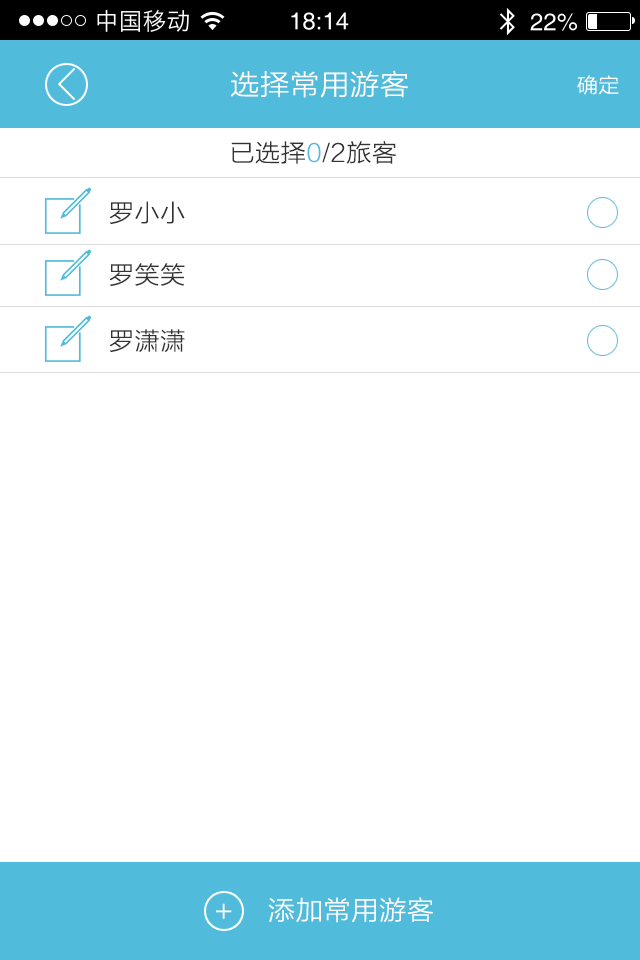
<style>
.page{position:relative;width:640px;height:960px;background:#ffffff}
.page>*{position:absolute;margin:0}
.t1{font:28px "STHeitiSC-Light";letter-spacing:-0.04em;color:#ffffff;scale:1.03 1}
.t2{font:20px "STHeitiSC-Light";letter-spacing:-0.04em;color:#ffffff;scale:1.03 1}
.t3{font:24px "STHeitiSC-Light";letter-spacing:-0.04em;color:#333333;scale:1.03 1}
.t4{font:24px "STHeitiSC-Light";letter-spacing:-0.04em;color:#50bbdb;scale:1.03 1}
.t5{font:26px "STHeitiSC-Light";letter-spacing:-0.04em;color:#ffffff;scale:1.03 1}
</style>
<div class="page">
<p class="t1" style="left:230px;top:70px;width:178px;height:28px">选择常用游客</p>
<p class="t2" style="left:577px;top:75px;width:42px;height:20px">确定</p>
<p class="t3" style="left:231px;top:141px;width:165px;height:23px">已选择<span class="t4">0</span>/2旅客</p>
<p class="t3" style="left:109px;top:201px;width:76px;height:23px">罗小小</p>
<p class="t3" style="left:109px;top:263px;width:76px;height:23px">罗笑笑</p>
<p class="t3" style="left:109px;top:329px;width:76px;height:23px">罗潇潇</p>
<p class="t1" style="left:216px;top:903px;width:16px;height:16px">+</p>
<p class="t5" style="left:268px;top:897px;width:165px;height:26px">添加常用游客</p>
</div>
